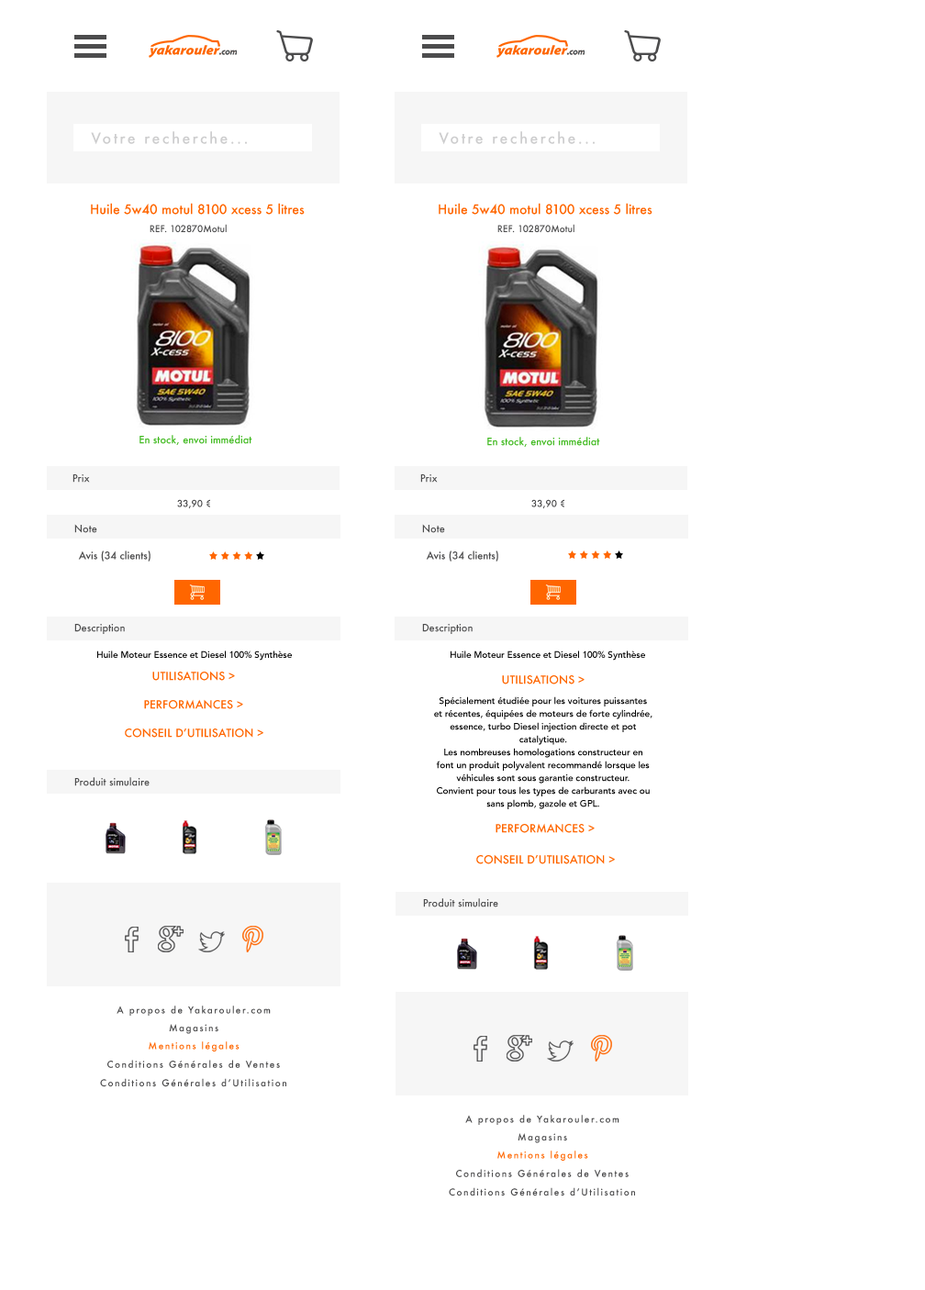
<style>
.page{position:relative;width:925px;height:1290px;background:#ffffff}
.page>*{position:absolute;margin:0}
.t1{font:14.7px "Futura-Medium";letter-spacing:0.15em;color:#cdcdce}
.t2{font:12.8px "Futura-Medium";color:#ff6600}
.t3{font:9.2px "Futura-Medium";color:#4c4c4d}
.t4{font:10.1px "Futura-Medium";color:#44bb24}
.t5{font:10.1px "Futura-Medium";color:#4c4c4d}
.t6{font:9.2px "Avenir-Medium";color:#000000}
.t7{font:11px "Futura-Medium";color:#ff6600}
.t8{font:9.2px/12.8px "Avenir-Medium";color:#000000}
.t9{font:9.2px "Futura-Medium";letter-spacing:0.15em;color:#4c4c4d}
.t10{font:9.2px "Futura-Medium";letter-spacing:0.15em;color:#ff6600}
</style>
<div class="page">
<p class="t1" style="left:91px;top:131px;width:156px;height:14px">Votre recherche...</p>
<p class="t1" style="left:438px;top:131px;width:156px;height:14px">Votre recherche...</p>
<p class="t2" style="left:91px;top:203px;width:214px;height:12px">Huile 5w40 motul 8100 xcess 5 litres</p>
<p class="t2" style="left:438px;top:203px;width:214px;height:12px">Huile 5w40 motul 8100 xcess 5 litres</p>
<p class="t3" style="left:150px;top:224px;width:77px;height:9px">REF. 102870Motul</p>
<p class="t3" style="left:497px;top:224px;width:77px;height:9px">REF. 102870Motul</p>
<p class="t4" style="left:139px;top:435px;width:113px;height:10px">En stock, envoi immédiat</p>
<p class="t4" style="left:487px;top:437px;width:113px;height:10px">En stock, envoi immédiat</p>
<p class="t5" style="left:72px;top:474px;width:18px;height:8px">Prix</p>
<p class="t5" style="left:420px;top:474px;width:18px;height:8px">Prix</p>
<p class="t3" style="left:177px;top:499px;width:33px;height:10px">33,90 €</p>
<p class="t3" style="left:531px;top:499px;width:33px;height:10px">33,90 €</p>
<p class="t5" style="left:74px;top:524px;width:23px;height:9px">Note</p>
<p class="t5" style="left:422px;top:524px;width:23px;height:9px">Note</p>
<p class="t5" style="left:78px;top:550px;width:72px;height:11px">Avis (34 clients)</p>
<p class="t5" style="left:426px;top:550px;width:72px;height:11px">Avis (34 clients)</p>
<p class="t5" style="left:74px;top:624px;width:51px;height:10px">Description</p>
<p class="t5" style="left:422px;top:624px;width:50px;height:10px">Description</p>
<p class="t6" style="left:97px;top:650px;width:195px;height:10px">Huile Moteur Essence et Diesel 100% Synthèse</p>
<p class="t6" style="left:450px;top:650px;width:195px;height:10px">Huile Moteur Essence et Diesel 100% Synthèse</p>
<p class="t7" style="left:152px;top:671px;width:83px;height:10px">UTILISATIONS &gt;</p>
<p class="t7" style="left:502px;top:674px;width:82px;height:10px">UTILISATIONS &gt;</p>
<p class="t7" style="left:144px;top:699px;width:99px;height:10px">PERFORMANCES &gt;</p>
<p class="t8" style="left:434px;top:696px;width:218px;height:113px;text-align:center">Spécialement étudiée pour les voitures puissantes et récentes, équipées de moteurs de forte cylindrée, essence, turbo Diesel injection directe et pot catalytique.<br>Les nombreuses homologations constructeur en font un produit polyvalent recommandé lorsque les véhicules sont sous garantie constructeur.<br>Convient pour tous les types de carburants avec ou sans plomb, gazole et GPL.</p>
<p class="t7" style="left:125px;top:727px;width:138px;height:10px">CONSEIL D’UTILISATION &gt;</p>
<p class="t5" style="left:74px;top:777px;width:76px;height:9px">Produit simulaire</p>
<p class="t7" style="left:495px;top:823px;width:99px;height:10px">PERFORMANCES &gt;</p>
<p class="t7" style="left:476px;top:854px;width:139px;height:10px">CONSEIL D’UTILISATION &gt;</p>
<p class="t5" style="left:423px;top:898px;width:75px;height:9px">Produit simulaire</p>
<p class="t9" style="left:116px;top:1005px;width:155px;height:10px">A propos de Yakarouler.com</p>
<p class="t9" style="left:169px;top:1024px;width:49px;height:10px">Magasins</p>
<p class="t10" style="left:149px;top:1041px;width:90px;height:10px">Mentions légales</p>
<p class="t9" style="left:107px;top:1059px;width:173px;height:10px">Conditions Générales de Ventes</p>
<p class="t9" style="left:100px;top:1078px;width:186px;height:9px">Conditions Générales d’Utilisation</p>
<p class="t9" style="left:465px;top:1114px;width:154px;height:11px">A propos de Yakarouler.com</p>
<p class="t9" style="left:517px;top:1133px;width:50px;height:10px">Magasins</p>
<p class="t10" style="left:497px;top:1150px;width:91px;height:10px">Mentions légales</p>
<p class="t9" style="left:456px;top:1169px;width:172px;height:9px">Conditions Générales de Ventes</p>
<p class="t9" style="left:449px;top:1187px;width:186px;height:9px">Conditions Générales d’Utilisation</p>
</div>
